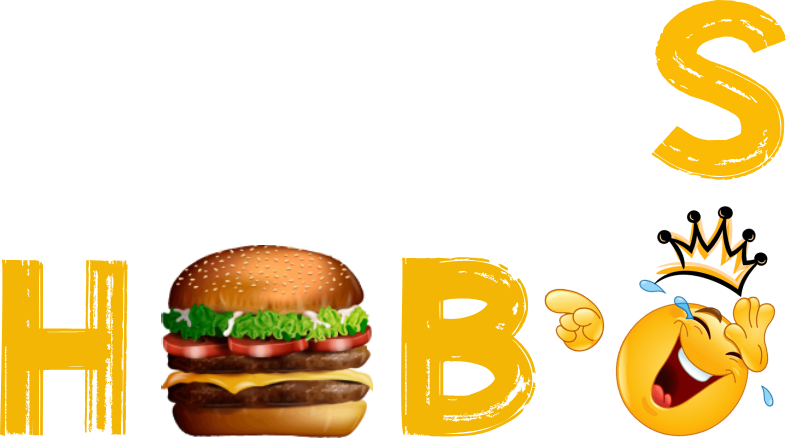
<style>
.page{position:relative;width:786px;height:438px;background:#ffffff}
.page>*{position:absolute;margin:0}
.t1{font:250px "CheerForever";color:#f4b605}
</style>
<div class="page">
<p class="t1" style="left:0px;top:257px;width:538px;height:181px">h    b</p>
</div>
